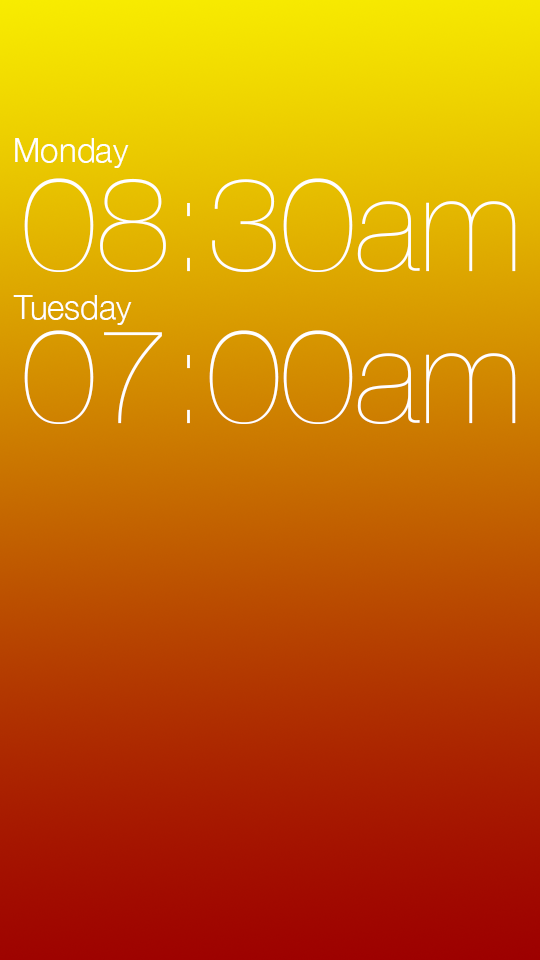
<style>
.page{position:relative;width:540px;height:960px}
.page>*{position:absolute;margin:0}
.t1{font:33px "HelveticaNeue-Light";color:#ffffff}
.t2{font:133px "HelveticaNeue-UltraLight";color:#ffffff}
</style>
<div class="page">
<p class="t1" style="left:15px;top:138px;width:114px;height:30px">Monday</p>
<p class="t2" style="left:24px;top:178px;width:492px;height:94px">08:30am</p>
<p class="t1" style="left:13px;top:295px;width:119px;height:30px">Tuesday</p>
<p class="t2" style="left:24px;top:330px;width:492px;height:94px">07:00am</p>
</div>
